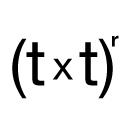
<style>
.page{position:relative;width:128px;height:128px;background:#ffffff}
.page>*{position:absolute;margin:0}
.t1{font:64.2px "HelveticaNeueLTPro-Roman";color:#000000}
.t2{font:64.2px "HelveticaNeueLTPro-Roman";letter-spacing:0.1em;color:#000000}
.t3{font:40.2px "HelveticaNeueLTPro-Roman";letter-spacing:0.14em;color:#000000}
.t4{font:64.2px "HelveticaNeueLTPro-Roman";letter-spacing:-0.08em;color:#000000}
.t5{font:20.2px "HelveticaNeueLTPro-Bd";color:#000000}
</style>
<div class="page">
<p class="t1" style="left:12px;top:35px;width:107px;height:64px">(<span class="t2">t</span><span class="t3">x</span>t<span class="t4">)</span><span class="t5">r</span></p>
</div>
